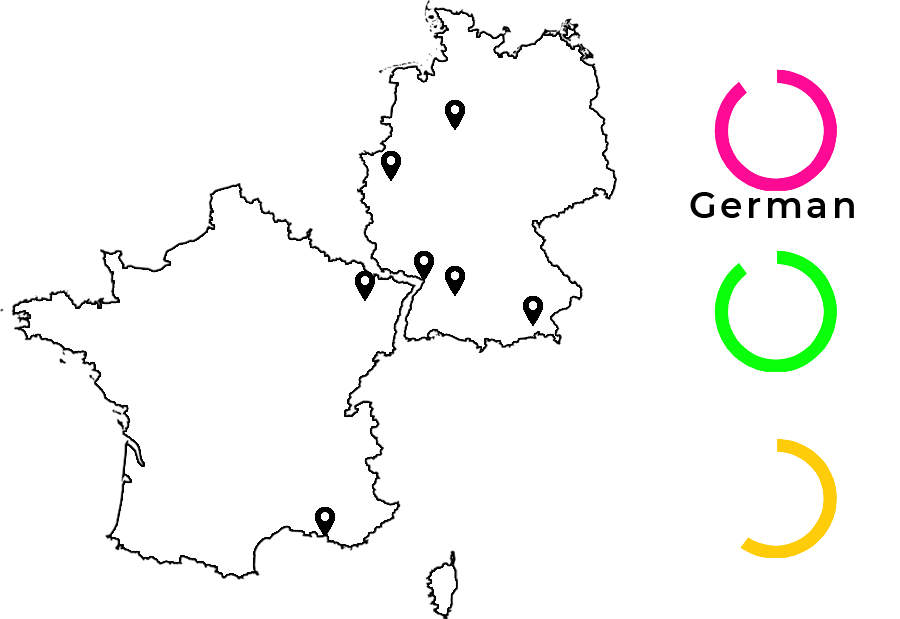
<style>
.page{position:relative;width:900px;height:619px;background:#ffffff}
.page>*{position:absolute;margin:0}
.t1{font:36px "Montserrat-SemiBold";letter-spacing:0.1em;color:#000000}
</style>
<div class="page">
<p class="t1" style="left:690px;top:192px;width:164px;height:26px">Germann</p>
</div>
